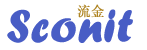
<style>
.page{position:relative;width:147px;height:50px;background:#ffffff}
.page>*{position:absolute;margin:0}
.t1{font:48px "ForteMT";color:#485dc5;font-weight:bold}
.t2{font:48px "ForteMT";color:#485dc5}
</style>
<div class="page">
<p class="t1" style="left:7px;top:9px;width:126px;height:34px"><span class="t2">S</span>conit</p>
</div>
